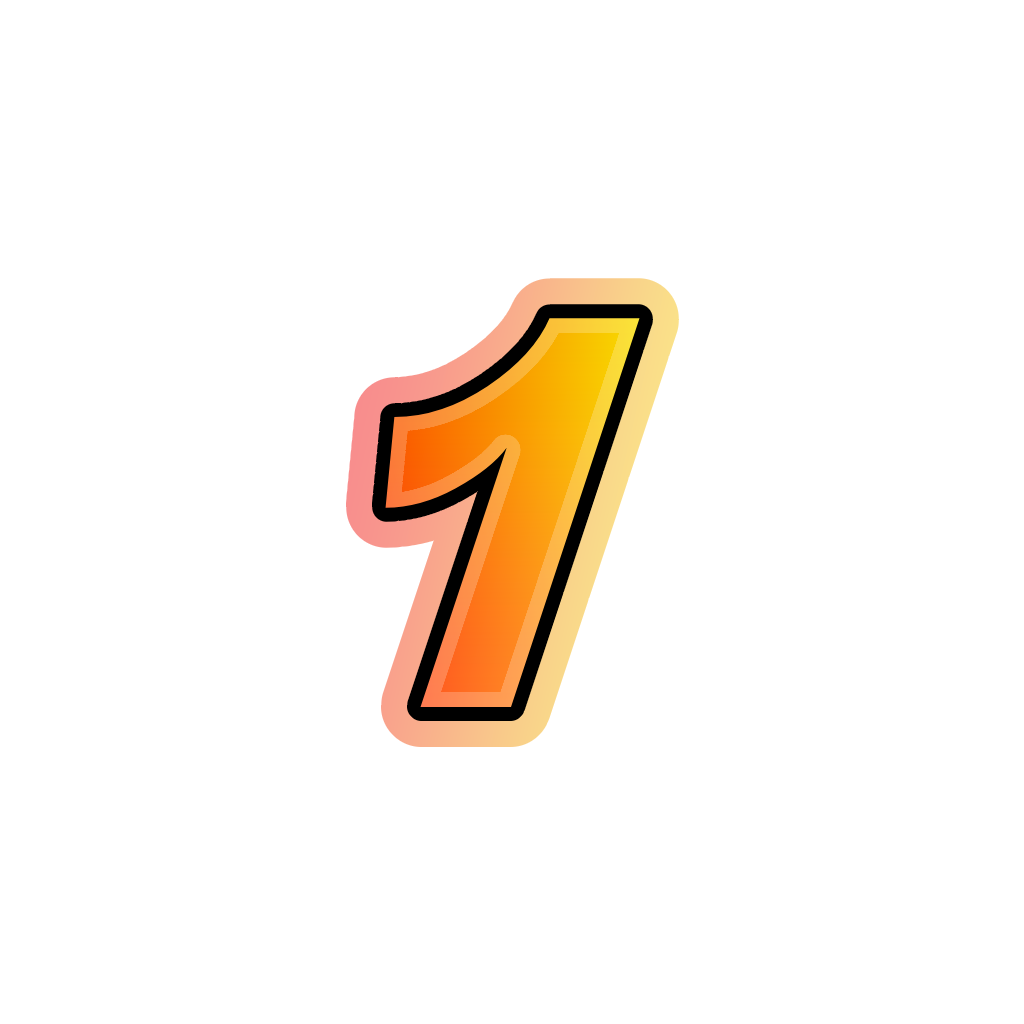
<style>
.page{position:relative;width:1024px;height:1024px;background:#ffffff}
.page>*{position:absolute;margin:0}
.t1{font:540px "FugazOne-Regular";font-style:italic;scale:0.93 1}
</style>
<div class="page">
<p class="t1" style="left:385px;top:318px;width:255px;height:389px">1</p>
</div>
